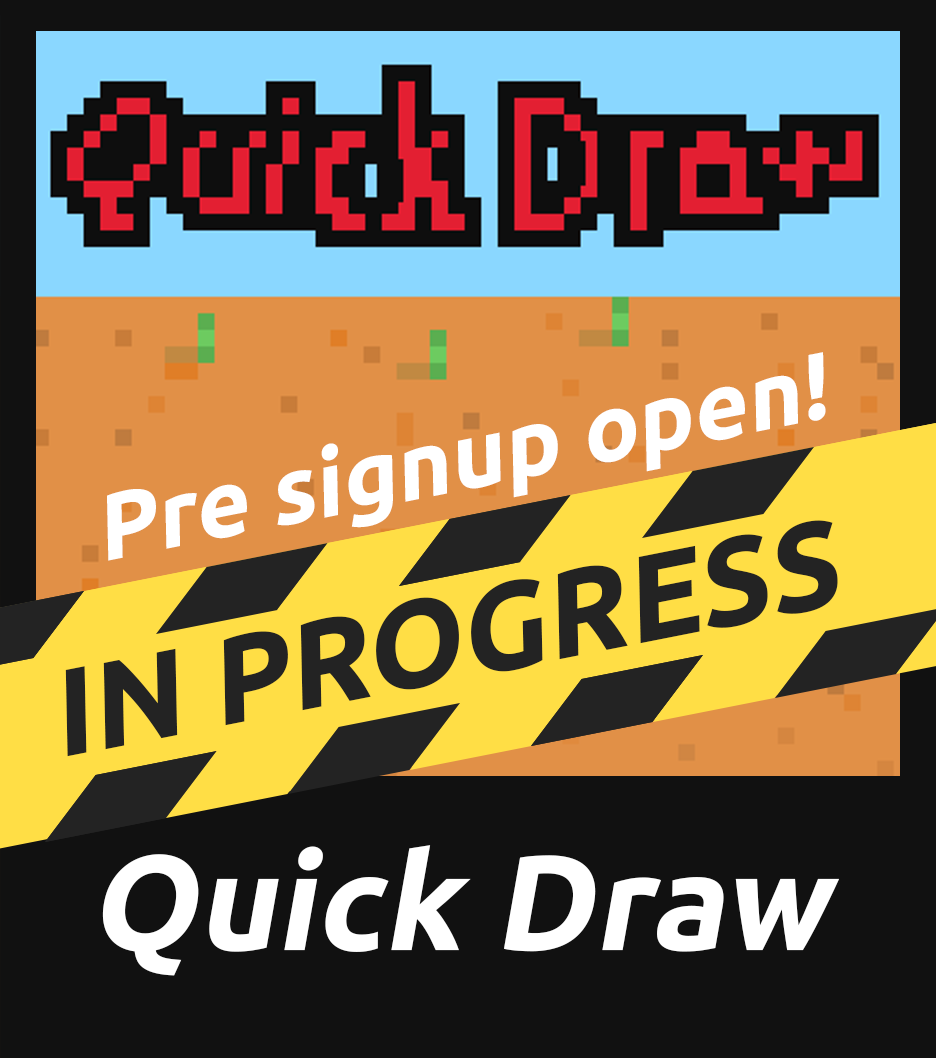
<style>
.page{position:relative;width:936px;height:1058px;background:#111111}
.page>*{position:absolute;margin:0}
.t1{font:93.6px "Ubuntu-Bold";color:#ffffff;font-style:italic}
.t2{font:122.4px "Ubuntu-Bold";color:#232323;font-style:italic}
.t3{font:135.4px "Ubuntu-Bold";color:#ffffff;font-style:italic}
</style>
<div class="page">
<p class="t1" style="left:107px;top:352px;width:719px;height:209px;rotate:-11deg">Pre signup open!</p>
<p class="t2" style="left:65px;top:520px;width:773px;height:237px;rotate:-11deg">IN PROGRESS</p>
<p class="t3" style="left:102px;top:845px;width:737px;height:131px">Quick Draw</p>
</div>
